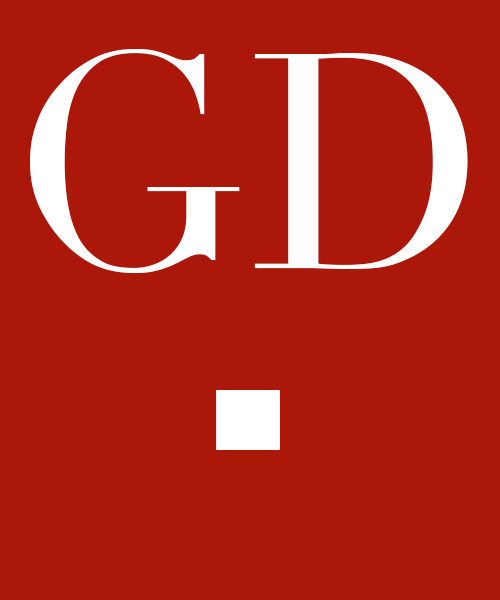
<style>
.page{position:relative;width:500px;height:600px;background:#ab1809}
.page>*{position:absolute;margin:0}
.t1{font:300px "Didot";color:#ffffff}
.t2{font:300px/182px "Arial-Black";color:#ffffff}
</style>
<div class="page">
<p class="t1" style="left:30px;top:49px;width:438px;height:401px;text-align:center">GD<br><span class="t2">.</span></p>
</div>
